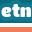
<style>
.page{position:relative;width:32px;height:32px;background:#ffffff}
.page>*{position:absolute;margin:0}
.t1{font:17px "TitanOne";color:#ffffff}
</style>
<div class="page">
<p class="t1" style="left:1px;top:4px;width:30px;height:13px">etn</p>
</div>
